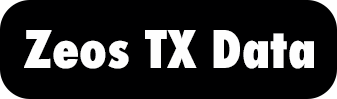
<style>
.page{position:relative;width:337px;height:99px;background:#000001}
.page>*{position:absolute;margin:0}
.t1{font:50.4px "Futura-CondensedExtraBold";color:#fefefe}
</style>
<div class="page">
<p class="t1" style="left:24px;top:30px;width:290px;height:39px">Zeos TX Data</p>
</div>
